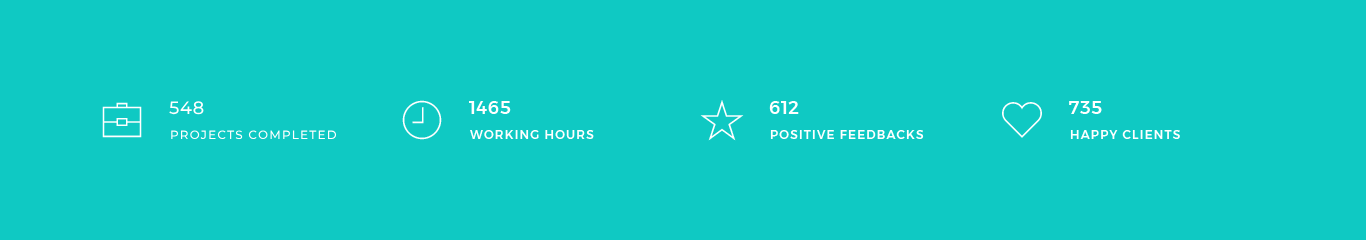
<style>
.page{position:relative;width:1366px;height:240px;background:#0fc9c3}
.page>*{position:absolute;margin:0}
.t1{font:18px "Montserrat-Medium";letter-spacing:0.03em;color:#ffffff;text-transform:uppercase}
.t2{font:12px "Montserrat-Medium";letter-spacing:0.1em;color:#ffffff;text-transform:uppercase}
</style>
<div class="page">
<p class="t1" style="left:169px;top:101px;width:35px;height:14px">548</p>
<p class="t1" style="left:469px;top:101px;width:42px;height:13px">1465</p>
<p class="t1" style="left:769px;top:101px;width:30px;height:13px">612</p>
<p class="t1" style="left:1069px;top:101px;width:33px;height:13px">735</p>
<p class="t2" style="left:171px;top:130px;width:166px;height:10px">projects completed</p>
<p class="t2" style="left:470px;top:130px;width:124px;height:9px">WORKING HOURS</p>
<p class="t2" style="left:770px;top:130px;width:154px;height:9px">POSITIVE FEEDBACKS</p>
<p class="t2" style="left:1070px;top:130px;width:110px;height:9px">HAPPY CLIENTS</p>
</div>
